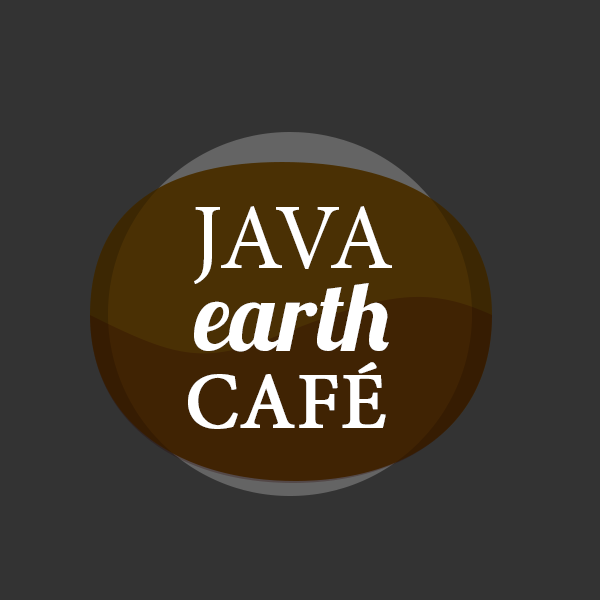
<style>
.page{position:relative;width:600px;height:600px;background:#333333}
.page>*{position:absolute;margin:0}
.t1{font:94.5px "MinionPro-Regular";color:#ffffff}
.t2{font:96.9px "Lobster1.3";color:#ffffff}
.t3{font:79.3px "MinionPro-Regular";color:#ffffff;font-weight:bold}
</style>
<div class="page">
<p class="t1" style="left:194px;top:206px;width:198px;height:78px">JAVA</p>
<p class="t2" style="left:194px;top:283px;width:195px;height:69px">earth</p>
<p class="t3" style="left:188px;top:362px;width:198px;height:67px">CAFÉ</p>
</div>
